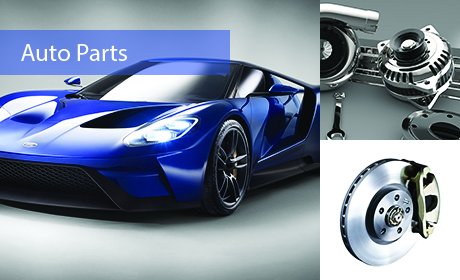
<style>
.page{position:relative;width:460px;height:280px}
.page>*{position:absolute;margin:0}
.t1{font:25px "MyriadPro-Regular";color:#fefeff}
</style>
<div class="page">
<p class="t1" style="left:21px;top:44px;width:106px;height:17px">Auto Parts</p>
</div>
